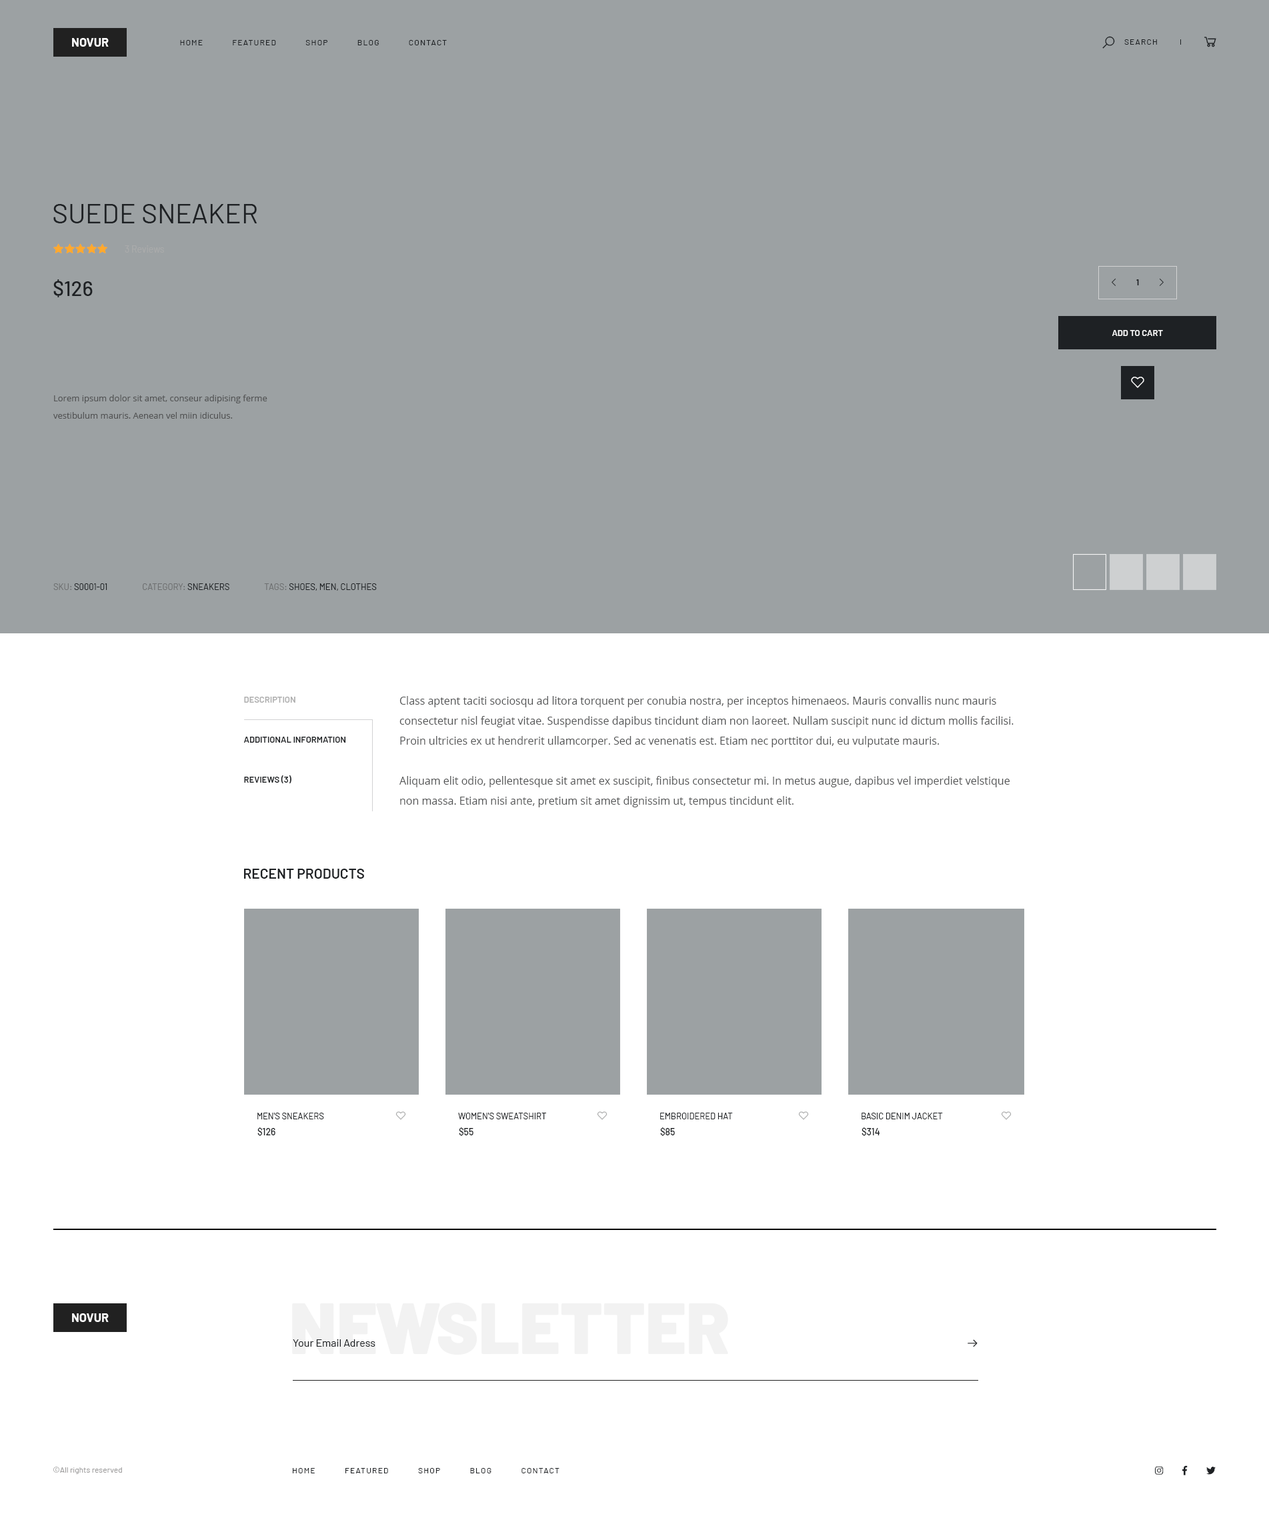
<style>
.page{position:relative;width:1269px;height:1516px;background:#ffffff}
.page>*{position:absolute;margin:0}
.t1{font:12px "Barlow-Bold";color:#fefefe;text-transform:uppercase}
.t2{font:8px "Barlow-Regular";letter-spacing:0.1em;color:#1e2124;text-transform:uppercase}
.t3{font:27.3px "Barlow-Regular";color:#1e2124;text-transform:uppercase}
.t4{font:9.3px "Barlow-Regular";color:#aaabab}
.t5{font:20.7px "Barlow-Medium";color:#1e2124}
.t6{font:8px "Barlow-Bold";color:#1e2124;text-transform:uppercase}
.t7{font:8.7px "Barlow-SemiBold";color:#ffffff;text-transform:uppercase}
.t8{font:8.7px/17.3px "OpenSans";color:#535455}
.t9{font:8.7px "Barlow-Regular";color:#1e2124;text-transform:uppercase}
.t10{font:8.7px "Barlow-Regular";color:#6e7071;text-transform:uppercase}
.t11{font:8.7px/40px "Barlow-SemiBold";color:#1e2124;text-transform:uppercase}
.t12{font:8.7px/40px "Barlow-SemiBold";color:#aeaeae;text-transform:uppercase}
.t13{font:10.7px/20px "OpenSans";color:#535455}
.t14{font:14px "Barlow-SemiBold";color:#1e2124;text-transform:uppercase}
.t15{font:9.3px "Barlow-Medium";color:#1e2124}
.t16{font:71.3px "Barlow-Black";color:#f2f2f2}
.t17{font:10.7px "Barlow-Regular";color:#1e2124}
.t18{font:8px "Barlow-Regular";color:#9e9d9d}
</style>
<div class="page">
<p class="t1" style="left:72px;top:38px;width:37px;height:9px">novur</p>
<p class="t2" style="left:180px;top:40px;width:267px;height:5px">Home            Featured            Shop            Blog            Contact</p>
<p class="t2" style="left:1124px;top:39px;width:33px;height:6px">Search</p>
<p class="t3" style="left:53px;top:204px;width:204px;height:19px">Suede Sneaker</p>
<p class="t4" style="left:125px;top:245px;width:39px;height:8px">3 Reviews</p>
<p class="t5" style="left:53px;top:279px;width:40px;height:18px">$126</p>
<p class="t6" style="left:1136px;top:279px;width:3px;height:6px">1</p>
<p class="t7" style="left:1111px;top:330px;width:52px;height:6px">Add to cart</p>
<p class="t8" style="left:53px;top:395px;width:214px;height:24px">Lorem ipsum dolor sit amet, conseur adipising ferme vestibulum mauris. Aenean vel miin idiculus.</p>
<p class="t9" style="left:53px;top:583px;width:324px;height:8px"><span class="t10">SKU: </span>S0001-01                    <span class="t10">Category: </span>Sneakers                    <span class="t10">Tags: </span>Shoes, Men, Clothes</p>
<p class="t11" style="left:243px;top:697px;width:103px;height:86px"><span class="t12">Description<br></span>additional information<br>Reviews (3)</p>
<p class="t13" style="left:399px;top:696px;width:614px;height:111px">Class aptent taciti sociosqu ad litora torquent per conubia nostra, per inceptos himenaeos. Mauris convallis nunc mauris   consectetur nisl feugiat vitae. Suspendisse dapibus tincidunt diam non laoreet. Nullam suscipit nunc id dictum mollis facilisi. Proin ultricies ex ut hendrerit ullamcorper. Sed ac venenatis est. Etiam nec porttitor dui, eu vulputate mauris. <br><br>Aliquam elit odio, pellentesque sit amet ex suscipit, finibus consectetur mi. In metus augue, dapibus vel imperdiet velstique non massa. Etiam nisi ante, pretium sit amet dignissim ut, tempus tincidunt elit.</p>
<p class="t14" style="left:244px;top:869px;width:120px;height:10px">Recent Products</p>
<p class="t9" style="left:257px;top:1113px;width:67px;height:6px">Men's Sneakers</p>
<p class="t9" style="left:458px;top:1113px;width:88px;height:6px">Women's Sweatshirt</p>
<p class="t9" style="left:660px;top:1113px;width:73px;height:6px">Embroidered Hat</p>
<p class="t9" style="left:861px;top:1113px;width:82px;height:6px">Basic Denim Jacket</p>
<p class="t15" style="left:257px;top:1127px;width:18px;height:9px">$126</p>
<p class="t15" style="left:459px;top:1127px;width:14px;height:9px">$55</p>
<p class="t15" style="left:660px;top:1127px;width:15px;height:9px">$85</p>
<p class="t15" style="left:861px;top:1127px;width:19px;height:9px">$314</p>
<p class="t1" style="left:72px;top:1313px;width:37px;height:9px">Novur</p>
<p class="t16" style="left:292px;top:1303px;width:436px;height:52px">NEWSLETTER</p>
<p class="t17" style="left:293px;top:1339px;width:82px;height:8px">Your Email Adress</p>
<p class="t18" style="left:53px;top:1467px;width:69px;height:7px">©All rights reserved</p>
<p class="t2" style="left:293px;top:1468px;width:266px;height:5px">Home            Featured            Shop            Blog            Contact</p>
</div>
